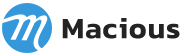
<style>
.page{position:relative;width:191px;height:55px;background:#ffffff}
.page>*{position:absolute;margin:0}
.t1{font:30px "Kanit-SemiBold";letter-spacing:0.025em;color:#232323}
</style>
<div class="page">
<p class="t1" style="left:62px;top:18px;width:118px;height:21px">Macious</p>
</div>
